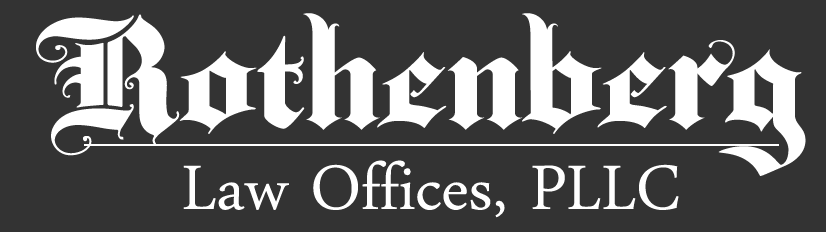
<style>
.page{position:relative;width:826px;height:232px;background:#333333}
.page>*{position:absolute;margin:0}
.t1{font:142px "BaroqueTextJF";color:#ffffff}
.t2{font:92px "DaunPenh";color:#ffffff}
</style>
<div class="page">
<p class="t1" style="left:36px;top:13px;width:770px;height:163px">Rothenberg</p>
<p class="t2" style="left:183px;top:160px;width:496px;height:58px">Law Offices, PLLC</p>
</div>
